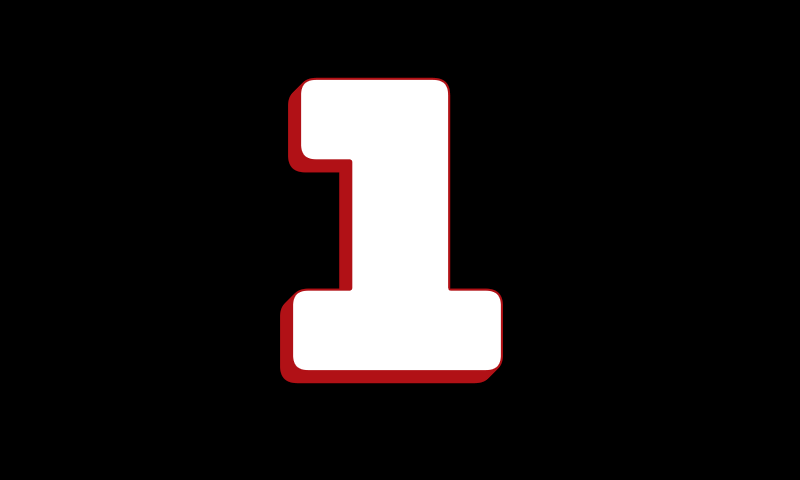
<style>
.page{position:relative;width:800px;height:480px;background:#000000}
.page>*{position:absolute;margin:0}
.t1{font:400px "Bungee-Regular";color:#ffffff;font-weight:bold}
</style>
<div class="page">
<p class="t1" style="left:290px;top:78px;width:212px;height:296px">1</p>
<p class="t1" style="left:291px;top:77px;width:212px;height:296px">1</p>
<p class="t1" style="left:280px;top:88px;width:212px;height:296px">1</p>
<p class="t1" style="left:281px;top:87px;width:212px;height:296px">1</p>
<p class="t1" style="left:282px;top:86px;width:212px;height:296px">1</p>
<p class="t1" style="left:283px;top:85px;width:212px;height:296px">1</p>
<p class="t1" style="left:284px;top:84px;width:212px;height:296px">1</p>
<p class="t1" style="left:285px;top:83px;width:212px;height:296px">1</p>
<p class="t1" style="left:286px;top:82px;width:212px;height:296px">1</p>
<p class="t1" style="left:287px;top:81px;width:212px;height:296px">1</p>
<p class="t1" style="left:288px;top:80px;width:212px;height:296px">1</p>
<p class="t1" style="left:289px;top:79px;width:212px;height:296px">1</p>
</div>
